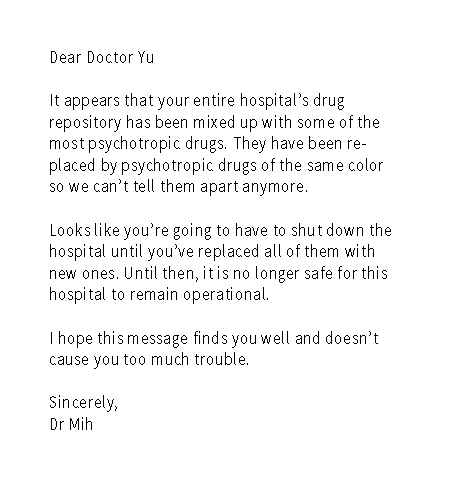
<style>
.page{position:relative;width:450px;height:500px;background:#ffffff}
.page>*{position:absolute;margin:0}
.t1{font:18px "SourceSansPro-Regular";letter-spacing:0.05em;color:#000000;scale:0.85 1}
</style>
<div class="page">
<p class="t1" style="left:50px;top:51px;width:341px;height:379px">Dear Doctor Yu<br><br>It appears that your entire hospital’s drug <br>repository has been mixed up with some of the most psychotropic drugs. They have been replaced by psychotropic drugs of the same color so we can’t tell them apart anymore. <br><br>Looks like you’re going to have to shut down the hospital until you’ve replaced all of them with new ones. Until then, it is no longer safe for this hospital to remain operational. <br><br>I hope this message finds you well and doesn’t cause you too much trouble.<br><br>Sincerely,<br>Dr Mih</p>
</div>
